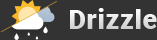
<style>
.page{position:relative;width:157px;height:40px;background:#333333}
.page>*{position:absolute;margin:0}
.t1{font:27.1px "Roboto-Black";letter-spacing:0.02em;color:#e7e7e7}
</style>
<div class="page">
<p class="t1" style="left:70px;top:8px;width:87px;height:21px">Drizzle</p>
</div>
